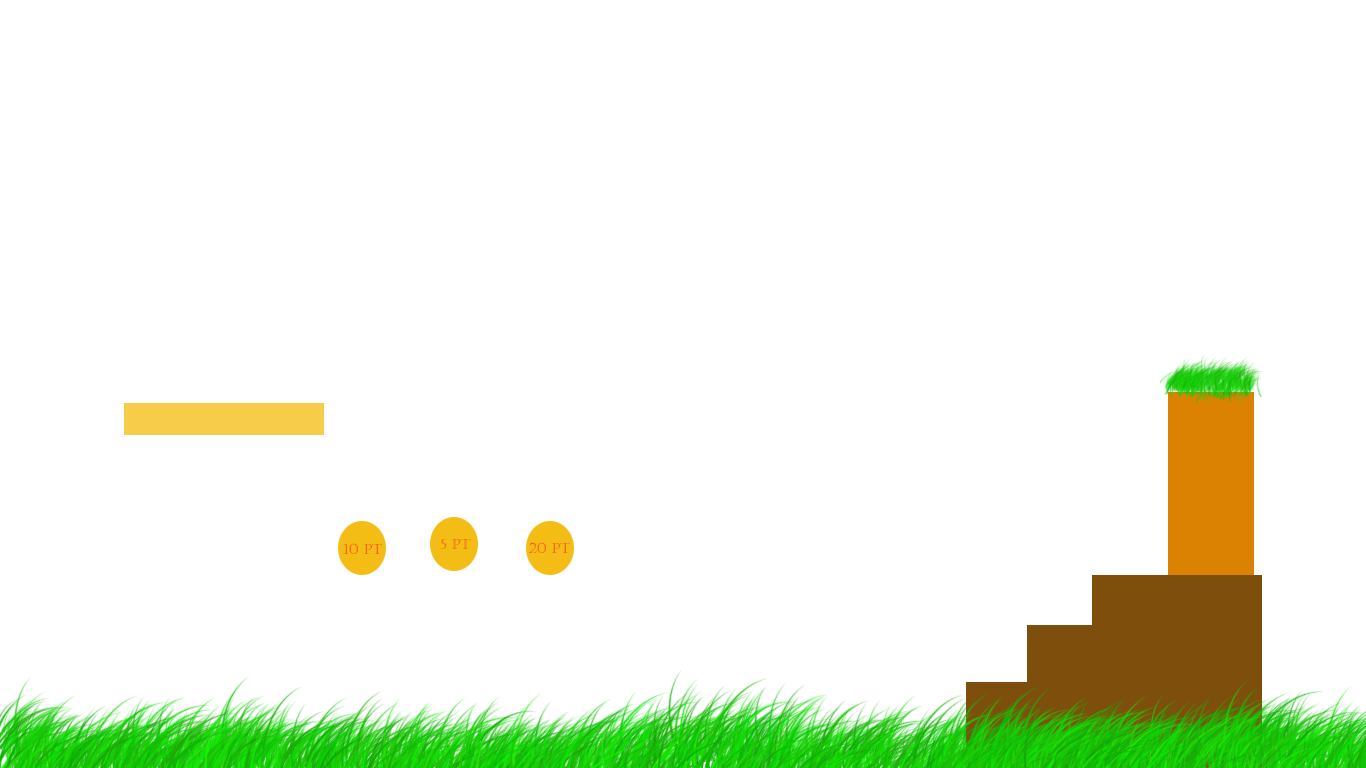
<style>
.page{position:relative;width:1366px;height:768px;background:#ffffff}
.page>*{position:absolute;margin:0}
.t1{font:14px "Castellar"}
</style>
<div class="page">
<p class="t1" style="left:343px;top:543px;width:39px;height:11px">10 PT</p>
<p class="t1" style="left:440px;top:538px;width:31px;height:11px">5 PT</p>
<p class="t1" style="left:529px;top:542px;width:41px;height:11px">20 PT</p>
</div>
